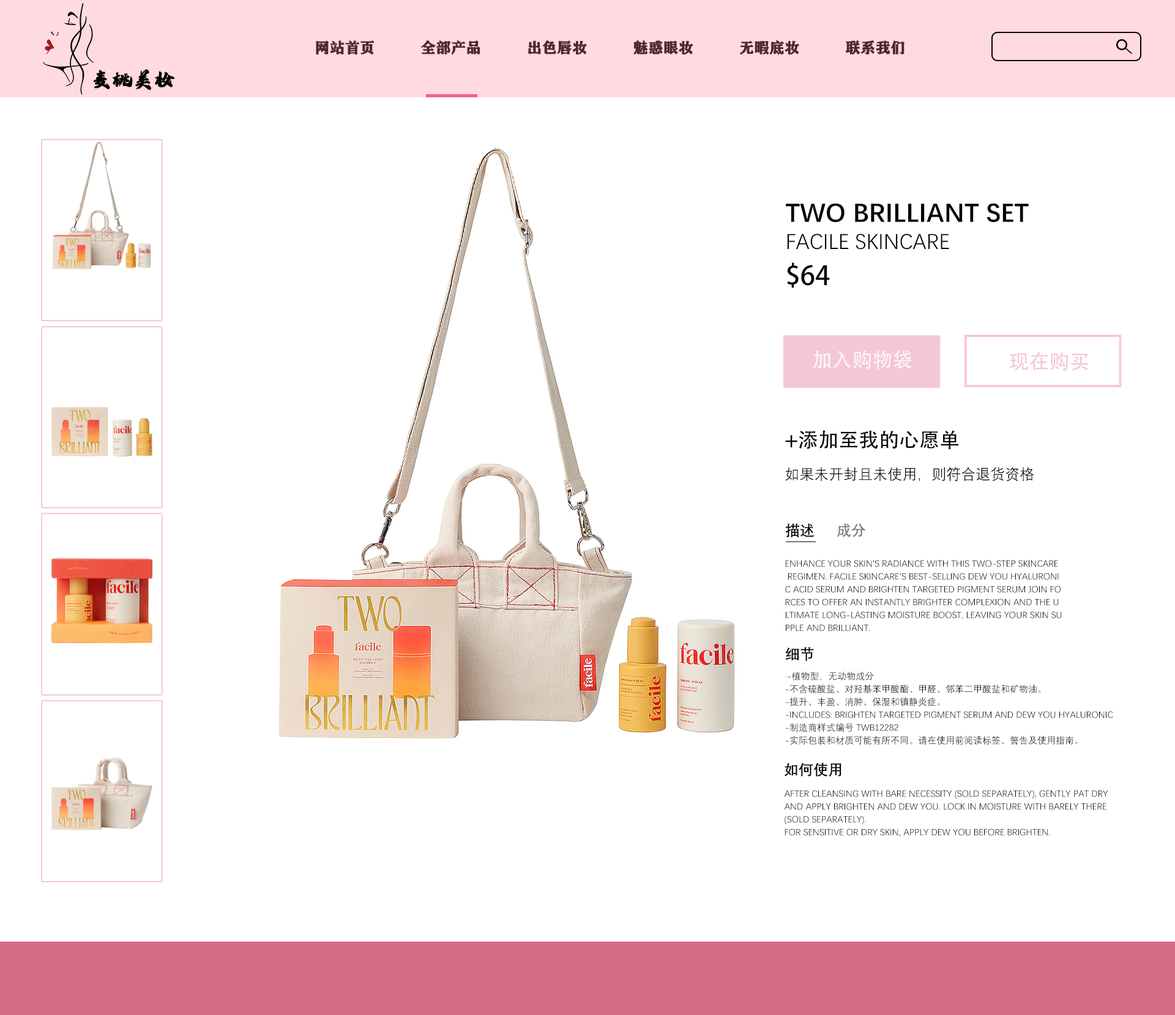
<style>
.page{position:relative;width:1175px;height:1015px;background:#ffffff}
.page>*{position:absolute;margin:0}
.t1{font:14.7px "FZCHSJW--GB1-0";color:#532530;text-transform:uppercase;font-weight:bold}
.t2{font:26.4px/31.2px "DengXian-Bold";color:#040404;text-transform:uppercase}
.t3{font:21.6px/31.2px "DengXian";color:#040404;text-transform:uppercase}
.t4{font:26.4px/38.4px "AdobeHeitiStd-Regular";color:#040404;text-transform:uppercase}
.t5{font:20.2px "AdobeHeitiStd-Regular";color:#fbf6f7;text-transform:uppercase}
.t6{font:20.2px "AdobeHeitiStd-Regular";color:#f5c7d6;text-transform:uppercase}
.t7{font:20.2px "AdobeHeitiStd-Regular";color:#060606;text-transform:uppercase}
.t8{font:14.7px "DengXian";color:#060606;text-transform:uppercase}
.t9{font:14.7px "DengXian-Bold";color:#060606;text-transform:uppercase}
.t10{font:14.7px "DengXian-Bold";color:#7c7c7c;text-transform:uppercase}
.t11{font:9.2px/12.8px "DengXian";color:#060606;text-transform:uppercase}
.t12{font:9.2px/31.2px "DengXian";color:#060606;text-transform:uppercase}
</style>
<div class="page">
<p class="t1" style="left:316px;top:40px;width:588px;height:15px">网站首页          全部产品          出色唇妆          魅惑眼妆          无暇底妆          联系我们</p>
<p class="t2" style="left:786px;top:203px;width:243px;height:85px">Two BRilliant set<br><span class="t3">facile skincare<br></span><span class="t4">$64</span></p>
<p class="t5" style="left:813px;top:350px;width:98px;height:20px">加入购物袋</p>
<p class="t6" style="left:1010px;top:352px;width:78px;height:19px">现在购买</p>
<p class="t7" style="left:785px;top:430px;width:173px;height:20px">+添加至我的心愿单</p>
<p class="t8" style="left:785px;top:467px;width:249px;height:15px">如果未开封且未使用，则符合退货资格</p>
<p class="t9" style="left:785px;top:523px;width:29px;height:14px">描述</p>
<p class="t10" style="left:836px;top:523px;width:30px;height:14px">成分</p>
<p class="t11" style="left:785px;top:560px;width:277px;height:71px">Enhance your skin's radiance with this two-step skincare<br> regimen. Facile Skincare's best-selling Dew You Hyaluroni<br>c Acid Serum and Brighten Targeted Pigment Serum join fo<br>rces to offer an instantly brighter complexion and the u<br>ltimate long-lasting moisture boost, leaving your skin su<br>pple and brilliant<span class="t12">.</span></p>
<p class="t9" style="left:785px;top:647px;width:29px;height:14px">细节</p>
<p class="t11" style="left:785px;top:672px;width:328px;height:73px">·-植物型，无动物成分<br>-不含硫酸盐、对羟基苯甲酸酯、甲醛、邻苯二甲酸盐和矿物油。<br>-提升、丰盈、消肿、保湿和镇静炎症。<br>-Includes: Brighten Targeted Pigment Serum and Dew You Hyaluronic <br>-制造商样式编号 TWB12282<br>-实际包装和材质可能有所不同。请在使用前阅读标签、警告及使用指南。</p>
<p class="t9" style="left:784px;top:762px;width:57px;height:15px">如何使用</p>
<p class="t11" style="left:784px;top:790px;width:324px;height:46px">After cleansing with Bare Necessity (sold separately), gently pat dry <br>and apply Brighten and Dew You. Lock in moisture with Barely There <br>(sold separately).<br>For sensitive or dry skin, apply Dew you before Brighten.</p>
</div>
